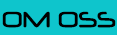
<style>
.page{position:relative;width:117px;height:35px;background:#0ec5cc}
.page>*{position:absolute;margin:0}
.t1{font:26px "Neuropol";color:#000000}
</style>
<div class="page">
<p class="t1" style="left:2px;top:11px;width:114px;height:17px">OM OSS</p>
</div>
